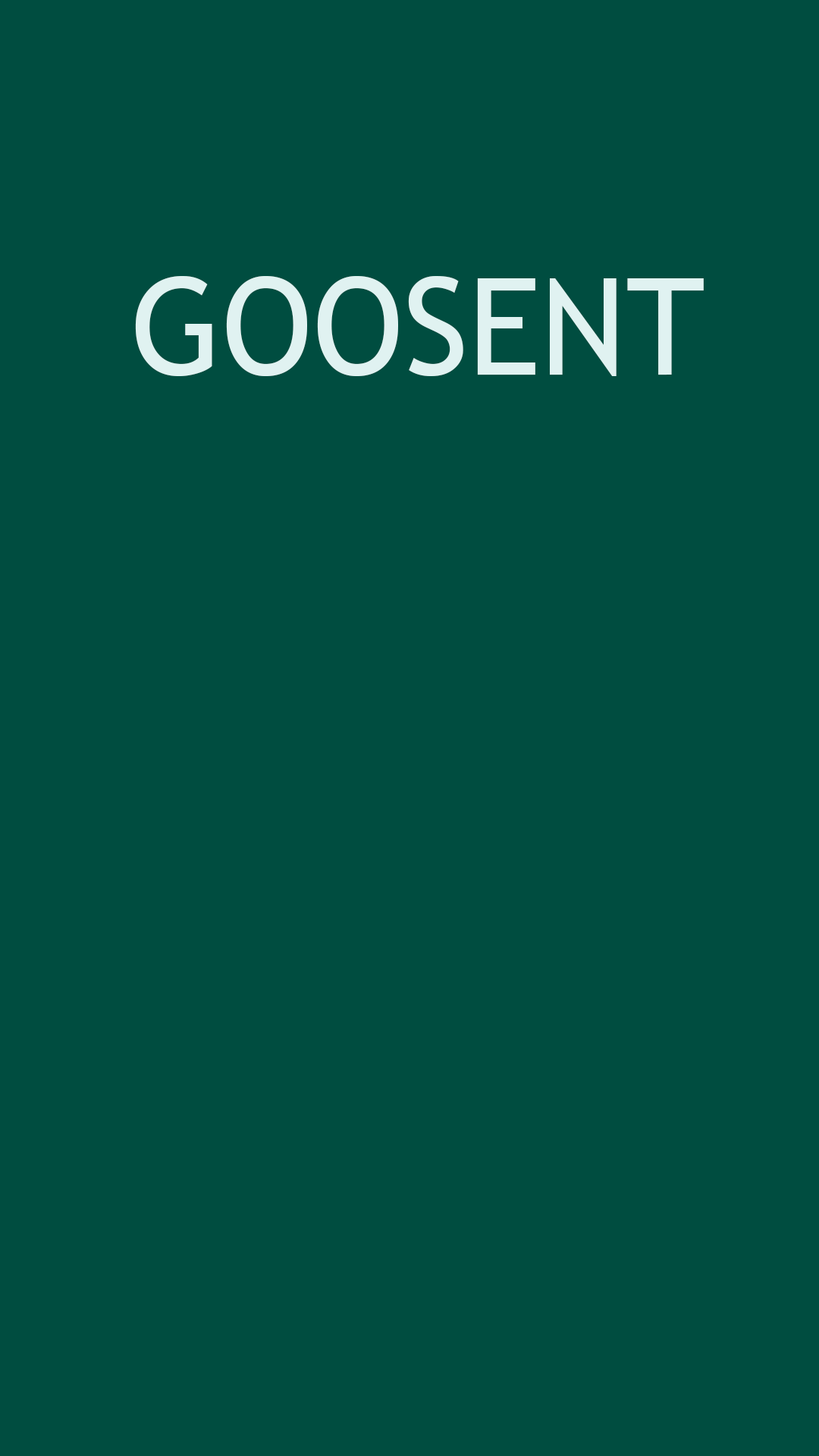
<style>
.page{position:relative;width:819px;height:1456px;background:#004d40}
.page>*{position:absolute;margin:0}
.t1{font:134.8px "TrebuchetMS";color:#e0f2f1}
</style>
<div class="page">
<p class="t1" style="left:135px;top:276px;width:569px;height:100px">GOOSENT</p>
</div>
